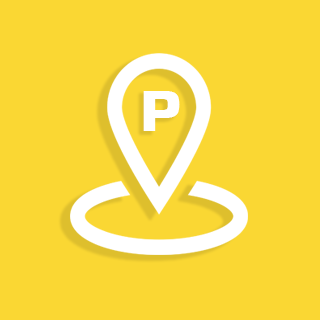
<style>
.page{position:relative;width:320px;height:320px;background:#fad733}
.page>*{position:absolute;margin:0}
.t1{font:57.3px "Saira-Bold";letter-spacing:-0.01em;color:#ffffff;scale:1.14 1}
</style>
<div class="page">
<p class="t1" style="left:143px;top:91px;width:37px;height:40px">P</p>
</div>
